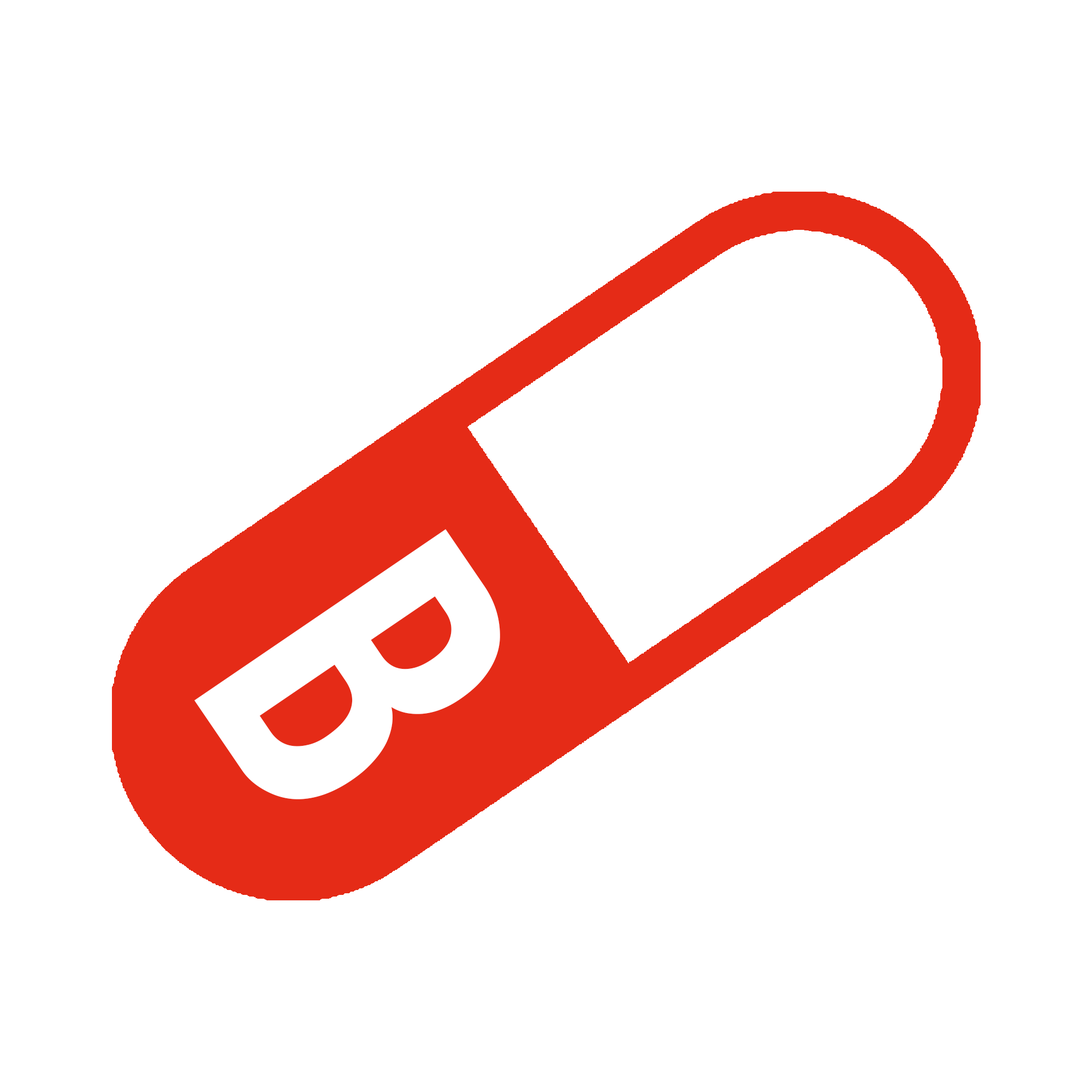
<style>
.page{position:relative;width:1092px;height:1092px;background:#ffffff}
.page>*{position:absolute;margin:0}
.t1{font:341.2px "Bebas";color:#ffffff}
</style>
<div class="page">
<p class="t1" style="left:194px;top:529px;width:306px;height:270px;rotate:56deg">B</p>
</div>
